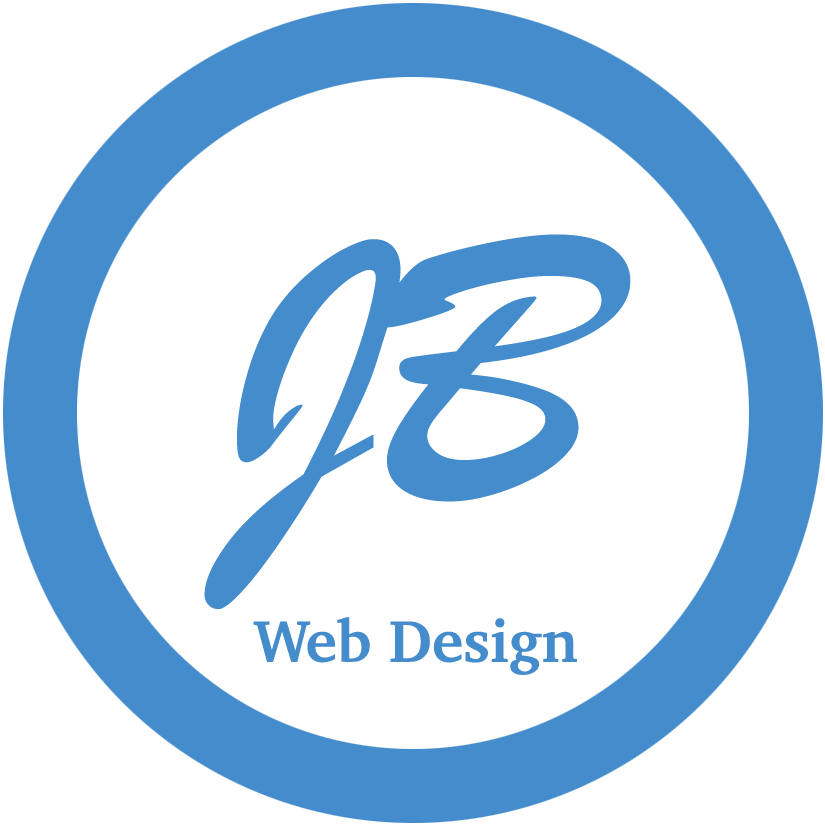
<style>
.page{position:relative;width:825px;height:825px;background:#ffffff}
.page>*{position:absolute;margin:0}
.t1{font:400px "BrushScriptMT";color:#448ccb}
.t2{font:60px "Charter-Bold";color:#448ccb}
</style>
<div class="page">
<p class="t1" style="left:204px;top:234px;width:427px;height:375px">JB</p>
<p class="t2" style="left:253px;top:617px;width:324px;height:58px">Web Design</p>
</div>
